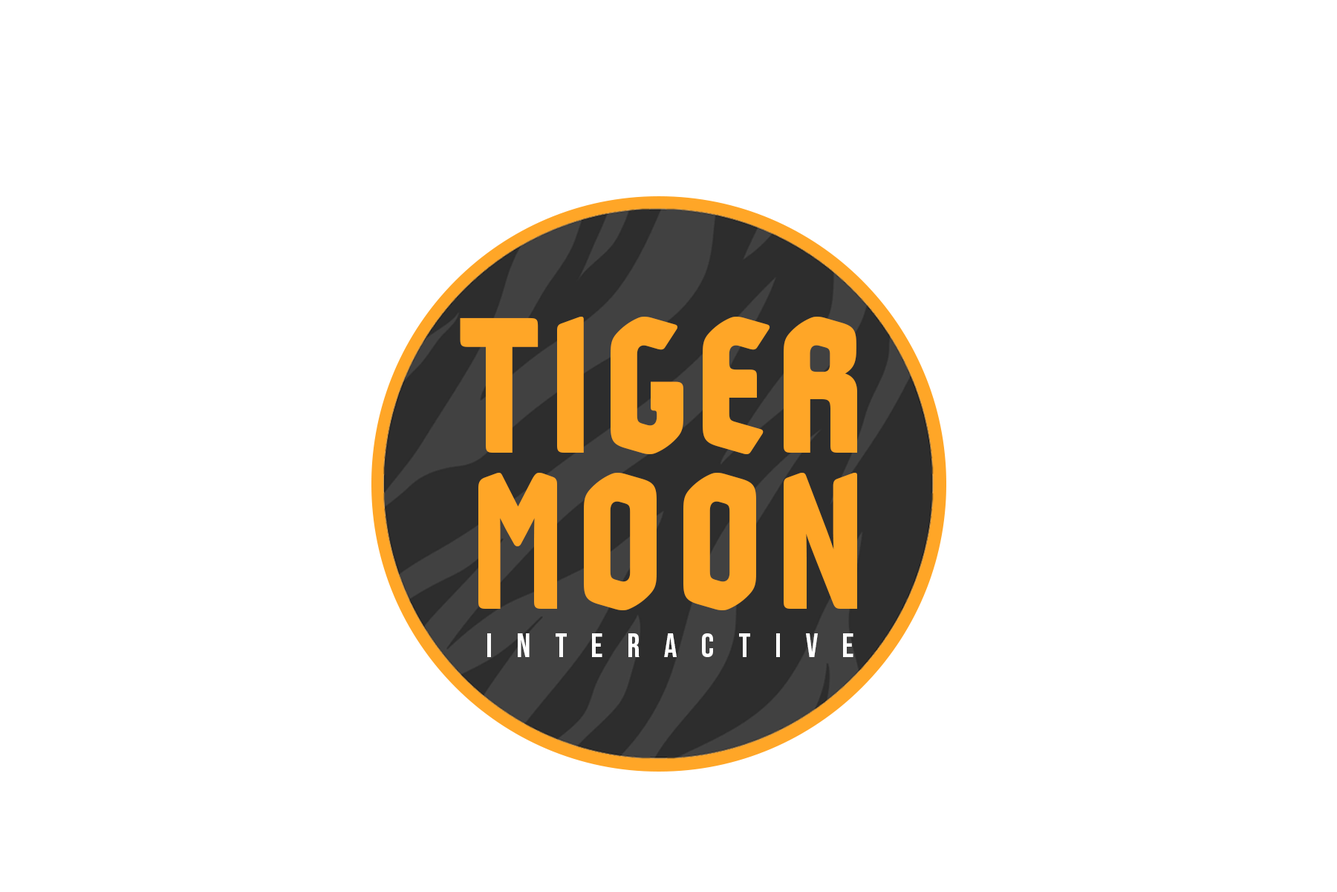
<style>
.page{position:relative;width:1337px;height:892px;background:#ffffff}
.page>*{position:absolute;margin:0}
.t1{font:212.6px "Adso-ExtraBold";letter-spacing:0.025em;color:#ffa627}
.t2{font:33.2px "BebasNeue-Regular";letter-spacing:0.725em;color:#ffffff}
</style>
<div class="page">
<p class="t1" style="left:460px;top:317px;width:397px;height:137px">TIGER</p>
<p class="t1" style="left:478px;top:473px;width:379px;height:137px">MOON</p>
<p class="t2" style="left:487px;top:633px;width:367px;height:24px">INTERACTIVE</p>
</div>
